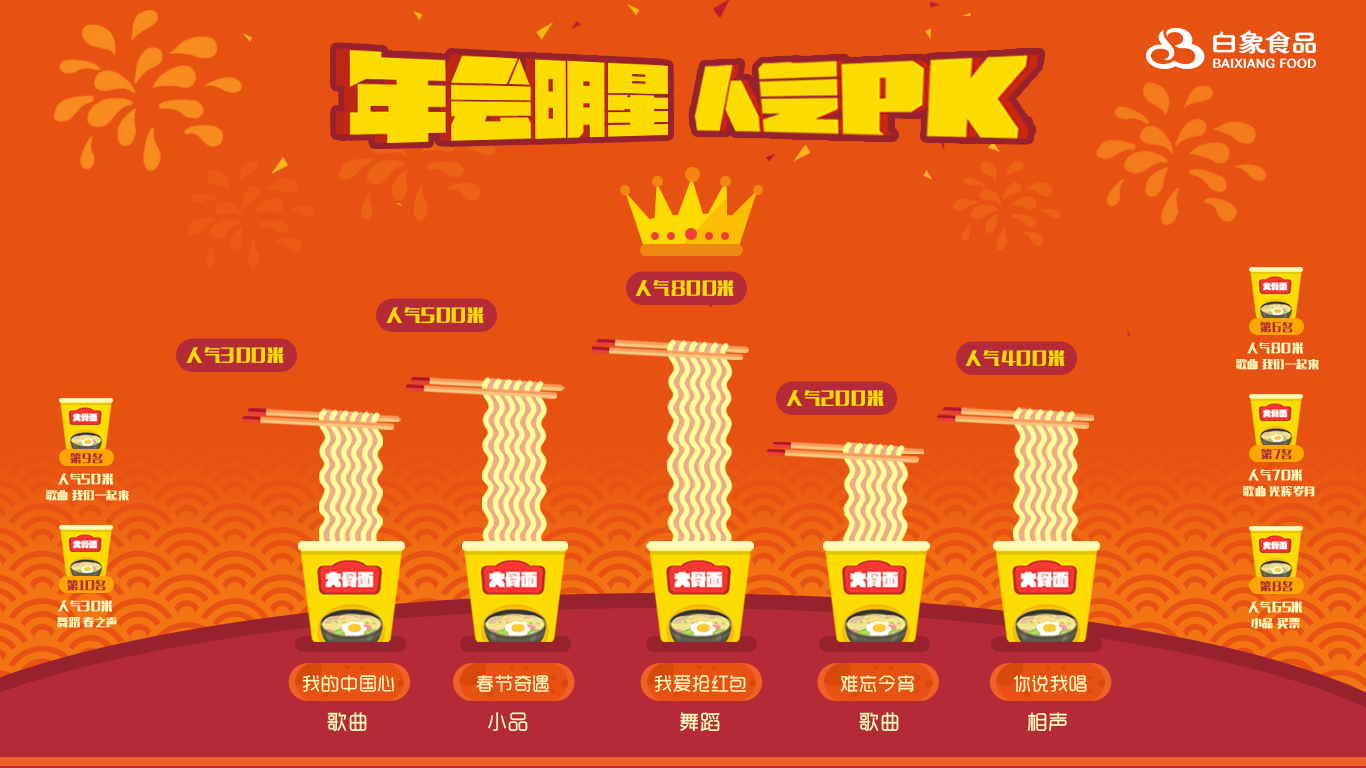
<style>
.page{position:relative;width:1366px;height:768px;background:#e75112}
.page>*{position:absolute;margin:0}
.t1{font:16.8px "MFLiHei_Noncommercial-Regular";letter-spacing:0.05em;color:#fcdc00}
.t2{font:11px "MFLiHei_Noncommercial-Regular";letter-spacing:0.05em;color:#b42a36}
.t3{font:11.6px "MFLiHei_Noncommercial-Regular";letter-spacing:0.05em;color:#fffcbc}
.t4{font:11px "MFLiHei_Noncommercial-Regular";letter-spacing:0.05em;color:#fffcbc}
.t5{font:18px "MFYueHei_Noncommercial-Regular";letter-spacing:0.05em;color:#fffcbb}
.t6{font:20px "MFYueHei_Noncommercial-Regular";letter-spacing:0.05em;color:#fffcbc}
</style>
<div class="page">
<p class="t1" style="left:635px;top:280px;width:99px;height:17px">人气800米</p>
<p class="t1" style="left:386px;top:307px;width:98px;height:17px">人气500米</p>
<p class="t2" style="left:1260px;top:322px;width:33px;height:11px">第6名</p>
<p class="t3" style="left:1247px;top:342px;width:56px;height:12px">人气80米</p>
<p class="t1" style="left:186px;top:347px;width:98px;height:17px">人气300米</p>
<p class="t1" style="left:965px;top:350px;width:100px;height:17px">人气400米</p>
<p class="t4" style="left:1236px;top:359px;width:83px;height:11px">歌曲 我们一起来</p>
<p class="t1" style="left:786px;top:390px;width:98px;height:17px">人气200米</p>
<p class="t2" style="left:1261px;top:449px;width:31px;height:11px">第7名</p>
<p class="t2" style="left:70px;top:453px;width:33px;height:11px">第9名</p>
<p class="t3" style="left:58px;top:473px;width:55px;height:12px">人气50米</p>
<p class="t3" style="left:1248px;top:469px;width:54px;height:12px">人气70米</p>
<p class="t4" style="left:1243px;top:486px;width:72px;height:11px">歌曲 光辉岁月</p>
<p class="t4" style="left:46px;top:490px;width:83px;height:11px">歌曲 我们一起来</p>
<p class="t2" style="left:67px;top:580px;width:39px;height:11px">第10名</p>
<p class="t2" style="left:1260px;top:581px;width:33px;height:11px">第8名</p>
<p class="t3" style="left:58px;top:600px;width:54px;height:12px">人气30米</p>
<p class="t3" style="left:1248px;top:601px;width:54px;height:12px">人气65米</p>
<p class="t4" style="left:57px;top:617px;width:60px;height:11px">舞蹈 春之声</p>
<p class="t4" style="left:1251px;top:618px;width:49px;height:11px">小品 买票</p>
<p class="t5" style="left:302px;top:675px;width:92px;height:17px">我的中国心</p>
<p class="t5" style="left:476px;top:675px;width:73px;height:17px">春节奇遇</p>
<p class="t5" style="left:654px;top:675px;width:92px;height:17px">我爱抢红包</p>
<p class="t5" style="left:840px;top:675px;width:74px;height:17px">难忘今宵</p>
<p class="t5" style="left:1013px;top:675px;width:74px;height:17px">你说我唱</p>
<p class="t6" style="left:327px;top:712px;width:40px;height:19px">歌曲</p>
<p class="t6" style="left:488px;top:712px;width:40px;height:19px">小品</p>
<p class="t6" style="left:680px;top:712px;width:40px;height:19px">舞蹈</p>
<p class="t6" style="left:859px;top:712px;width:40px;height:19px">歌曲</p>
<p class="t6" style="left:1027px;top:712px;width:40px;height:19px">相声</p>
</div>
